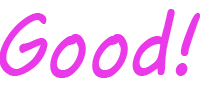
<style>
.page{position:relative;width:200px;height:100px;background:#ffffff}
.page>*{position:absolute;margin:0}
.t1{font:88.1px "MVBoli";color:#ea39e8;scale:0.89 1}
</style>
<div class="page">
<p class="t1" style="left:0px;top:9px;width:201px;height:69px">Good!</p>
</div>
